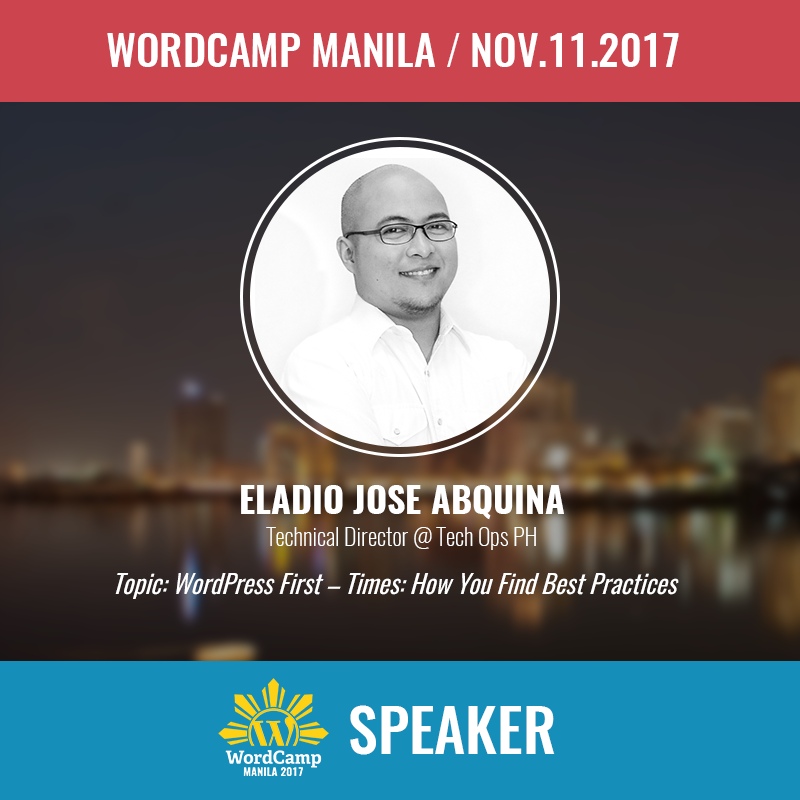
<style>
.page{position:relative;width:800px;height:800px}
.page>*{position:absolute;margin:0}
.t1{font:42px "Oswald-Medium";color:#ffffff;text-transform:uppercase}
.t2{font:42px "Oswald-Light";color:#ffffff;text-transform:uppercase}
.t3{font:36px "Oswald-Bold";color:#ffffff;text-transform:uppercase}
.t4{font:24px "Oswald-ExtraLight";color:#ffffff}
.t5{font:26px "Oswald-RegularItalic";color:#ffffff;font-style:italic}
.t6{font:60px "Oswald-Medium";color:#ffffff;text-transform:uppercase}
</style>
<div class="page">
<p class="t1" style="left:107px;top:33px;width:572px;height:34px">Wordcamp Manila <span class="t2">/</span> Nov.11.2017</p>
<p class="t3" style="left:241px;top:485px;width:323px;height:35px">Eladio Jose Abquina</p>
<p class="t4" style="left:266px;top:527px;width:270px;height:23px">Technical Director @ Tech Ops PH</p>
<p class="t5" style="left:115px;top:573px;width:564px;height:26px">Topic: WordPress First – Times: How You Find Best Practices</p>
<p class="t6" style="left:350px;top:705px;width:205px;height:50px">Speaker</p>
</div>
